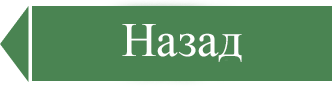
<style>
.page{position:relative;width:332px;height:88px;background:#4a8452}
.page>*{position:absolute;margin:0}
.t1{font:48px "TimesNewRomanPSMT";color:#ffffff}
</style>
<div class="page">
<p class="t1" style="left:122px;top:24px;width:120px;height:38px">Назад</p>
</div>
